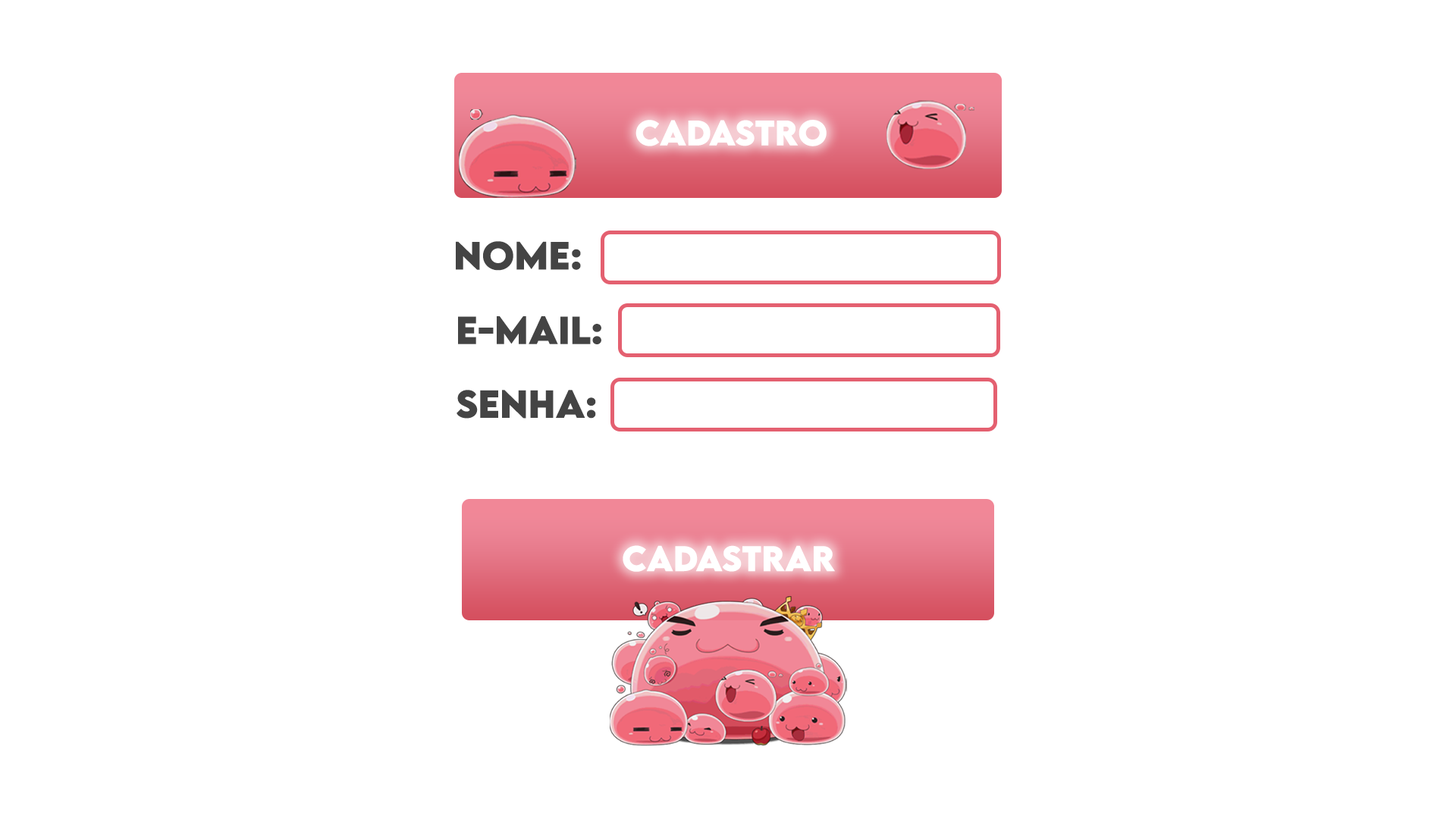
<style>
.page{position:relative;width:1456px;height:819px;background:#ffffff}
.page>*{position:absolute;margin:0}
.t1{font:31.4px "LEMONMILK-Bold";color:#ffffff}
.t2{font:34.8px "LEMONMILK-Bold";color:#444444}
</style>
<div class="page">
<p class="t1" style="left:635px;top:120px;width:192px;height:26px">CADASTRO</p>
<p class="t2" style="left:456px;top:241px;width:125px;height:30px">NOME:</p>
<p class="t2" style="left:458px;top:316px;width:143px;height:28px">E-MAIL:</p>
<p class="t2" style="left:457px;top:390px;width:139px;height:29px">SENHA:</p>
<p class="t1" style="left:623px;top:545px;width:212px;height:27px">CADASTRar</p>
</div>
